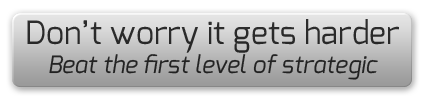
<style>
.page{position:relative;width:425px;height:100px}
.page>*{position:absolute;margin:0}
.t1{font:24px "Exo-Italic";color:#292929}
.t2{font:32px "Exo-Regular";color:#292929}
</style>
<div class="page">
<p class="t1" style="left:27px;top:19px;width:372px;height:61px;text-align:center"><span class="t2">Don’t worry it gets harder<br></span>Beat the first level of strategic</p>
</div>
